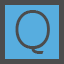
<style>
.page{position:relative;width:64px;height:64px;background:#57addf}
.page>*{position:absolute;margin:0}
.t1{font:52px "Aliquam";color:#4c4c4c}
</style>
<div class="page">
<p class="t1" style="left:15px;top:10px;width:35px;height:44px">Q</p>
</div>
